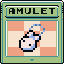
<style>
.page{position:relative;width:64px;height:64px;background:#a4c283}
.page>*{position:absolute;margin:0}
.t1{font:8px "Early-GameBoy";color:#081010}
</style>
<div class="page">
<p class="t1" style="left:9px;top:8px;width:46px;height:6px">AMULET</p>
</div>
